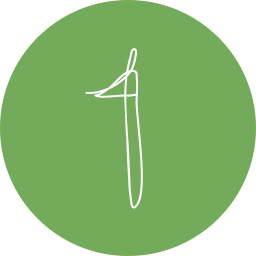
<style>
.page{position:relative;width:256px;height:256px;background:#73ab5b}
.page>*{position:absolute;margin:0}
.t1{font:233.4px "LightScribe";color:#ffffff}
</style>
<div class="page">
<p class="t1" style="left:85px;top:48px;width:58px;height:161px">1</p>
</div>
